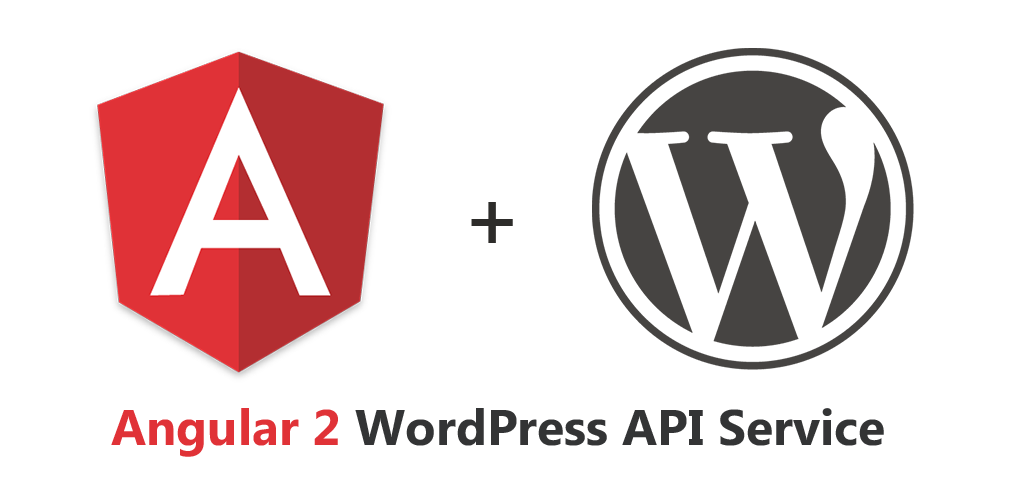
<style>
.page{position:relative;width:1024px;height:500px;background:#ffffff}
.page>*{position:absolute;margin:0}
.t1{font:83.3px "BookAntiqua-Bold";color:#2d2c2a}
.t2{font:50px "MicrosoftPhagsPa-Bold";color:#333435}
.t3{font:50px "MicrosoftPhagsPa-Bold";color:#e03237}
</style>
<div class="page">
<p class="t1" style="left:471px;top:202px;width:42px;height:41px">+</p>
<p class="t2" style="left:111px;top:408px;width:773px;height:49px"><span class="t3">Angular 2</span> WordPress API Service</p>
</div>
